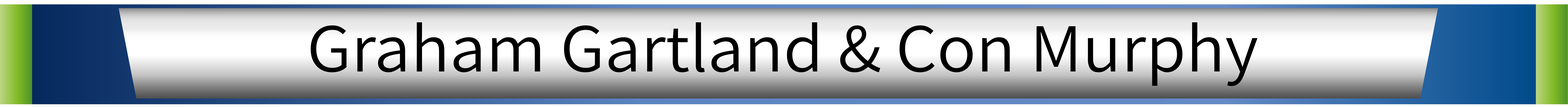
<style>
.page{position:relative;width:1568px;height:107px}
.page>*{position:absolute;margin:0}
.t1{font:69px "Assistant-Regular";color:#000000;scale:1.05 1}
</style>
<div class="page">
<p class="t1" style="left:311px;top:22px;width:947px;height:64px">Graham Gartland &amp; Con Murphy</p>
</div>
